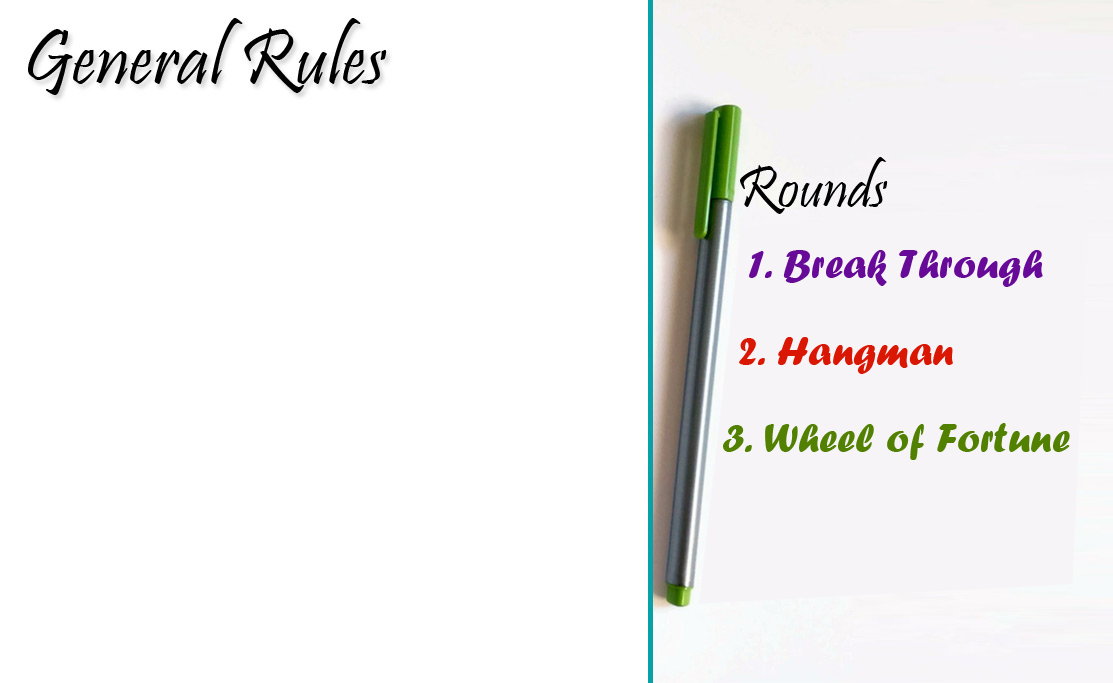
<style>
.page{position:relative;width:1113px;height:683px;background:#ffffff}
.page>*{position:absolute;margin:0}
.t1{font:42.2px "ForteMT";color:#680a98}
.t2{font:42.2px "ForteMT";color:#da1703}
.t3{font:42.2px "ForteMT";color:#528101}
</style>
<div class="page">
<p class="t1" style="left:749px;top:250px;width:294px;height:37px">1. Break Through</p>
<p class="t2" style="left:739px;top:337px;width:214px;height:37px">2. Hangman</p>
<p class="t3" style="left:723px;top:423px;width:347px;height:37px">3. Wheel of Fortune</p>
</div>
